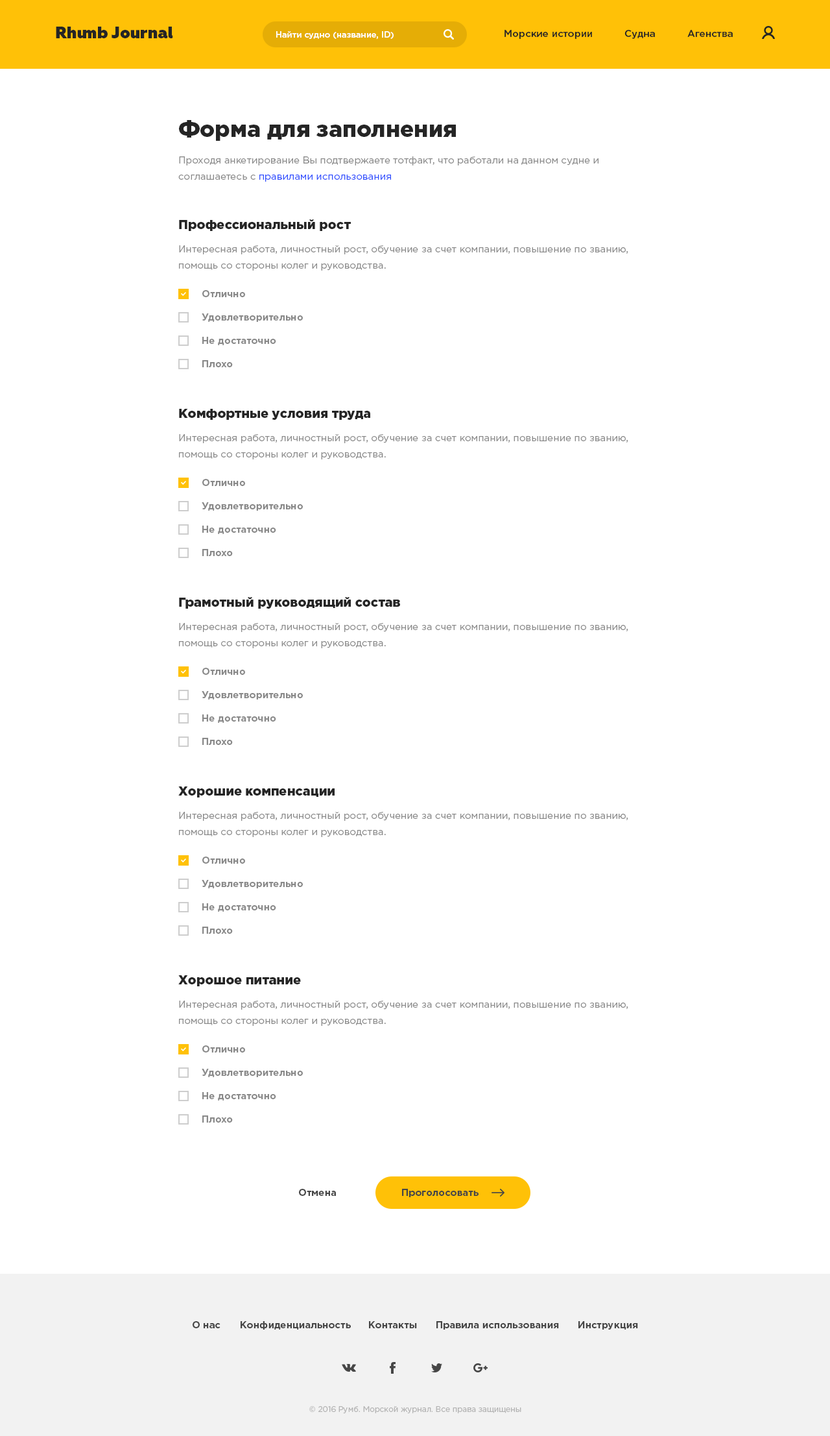
<style>
.page{position:relative;width:830px;height:1436px;background:#ffffff}
.page>*{position:absolute;margin:0}
.t1{font:16.2px "Geometria-Heavy";color:#252525}
.t2{font:9.7px "GothamPro-Medium";color:#252525}
.t3{font:8.4px "GothamPro-Medium";color:#ffffff}
.t4{font:22.7px "GothamPro-Black";color:#252525}
.t5{font:9.7px/16.2px "GothamPro";color:#898989}
.t6{font:9.7px/16.2px "GothamPro";color:#304ffe}
.t7{font:13px "GothamPro-Black";color:#252525}
.t8{font:9.7px "GothamPro-Bold";color:#898989}
.t9{font:9.7px "GothamPro-Bold";color:#464646}
.t10{font:7.8px "GothamPro";color:#b4b4b4}
</style>
<div class="page">
<p class="t1" style="left:56px;top:27px;width:117px;height:11px">Rhumb Journal</p>
<p class="t2" style="left:505px;top:30px;width:87px;height:9px">Морские истории</p>
<p class="t2" style="left:625px;top:30px;width:30px;height:9px">Судна</p>
<p class="t2" style="left:688px;top:30px;width:45px;height:7px">Агенства</p>
<p class="t3" style="left:276px;top:31px;width:118px;height:8px">Найти судно (название, ID)</p>
<p class="t4" style="left:179px;top:120px;width:277px;height:21px">Форма для заполнения</p>
<p class="t5" style="left:178px;top:156px;width:421px;height:26px">Проходя анкетирование Вы подтвержаете тотфакт, что работали на данном судне и соглашаетесь с <span class="t6">правилами использования</span></p>
<p class="t7" style="left:179px;top:219px;width:172px;height:12px">Профессиональный рост</p>
<p class="t5" style="left:179px;top:245px;width:449px;height:26px">Интересная работа, личностный рост, обучение за счет компании, повышение по званию, помощь со стороны колег и руководства.</p>
<p class="t8" style="left:202px;top:290px;width:43px;height:7px">Отлично</p>
<p class="t8" style="left:202px;top:313px;width:101px;height:9px">Удовлетворительно</p>
<p class="t8" style="left:202px;top:337px;width:74px;height:8px">Не достаточно</p>
<p class="t8" style="left:202px;top:360px;width:31px;height:7px">Плохо</p>
<p class="t7" style="left:179px;top:409px;width:191px;height:11px">Комфортные условия труда</p>
<p class="t5" style="left:179px;top:434px;width:449px;height:25px">Интересная работа, личностный рост, обучение за счет компании, повышение по званию, помощь со стороны колег и руководства.</p>
<p class="t8" style="left:202px;top:479px;width:43px;height:7px">Отлично</p>
<p class="t8" style="left:202px;top:502px;width:101px;height:9px">Удовлетворительно</p>
<p class="t8" style="left:202px;top:526px;width:74px;height:8px">Не достаточно</p>
<p class="t8" style="left:202px;top:549px;width:31px;height:7px">Плохо</p>
<p class="t7" style="left:179px;top:597px;width:221px;height:12px">Грамотный руководящий состав</p>
<p class="t5" style="left:179px;top:623px;width:449px;height:25px">Интересная работа, личностный рост, обучение за счет компании, повышение по званию, помощь со стороны колег и руководства.</p>
<p class="t8" style="left:202px;top:668px;width:43px;height:7px">Отлично</p>
<p class="t8" style="left:202px;top:691px;width:101px;height:8px">Удовлетворительно</p>
<p class="t8" style="left:202px;top:714px;width:74px;height:9px">Не достаточно</p>
<p class="t8" style="left:202px;top:738px;width:31px;height:7px">Плохо</p>
<p class="t7" style="left:178px;top:786px;width:157px;height:11px">Хорошие компенсации</p>
<p class="t5" style="left:179px;top:812px;width:449px;height:25px">Интересная работа, личностный рост, обучение за счет компании, повышение по званию, помощь со стороны колег и руководства.</p>
<p class="t8" style="left:202px;top:856px;width:43px;height:8px">Отлично</p>
<p class="t8" style="left:202px;top:880px;width:101px;height:8px">Удовлетворительно</p>
<p class="t8" style="left:202px;top:903px;width:74px;height:9px">Не достаточно</p>
<p class="t8" style="left:202px;top:927px;width:31px;height:7px">Плохо</p>
<p class="t7" style="left:178px;top:975px;width:123px;height:11px">Хорошое питание</p>
<p class="t5" style="left:179px;top:1000px;width:449px;height:26px">Интересная работа, личностный рост, обучение за счет компании, повышение по званию, помощь со стороны колег и руководства.</p>
<p class="t8" style="left:202px;top:1045px;width:43px;height:7px">Отлично</p>
<p class="t8" style="left:202px;top:1069px;width:101px;height:8px">Удовлетворительно</p>
<p class="t8" style="left:202px;top:1092px;width:74px;height:8px">Не достаточно</p>
<p class="t8" style="left:202px;top:1115px;width:31px;height:7px">Плохо</p>
<p class="t9" style="left:299px;top:1189px;width:37px;height:7px">Отмена</p>
<p class="t9" style="left:402px;top:1189px;width:77px;height:8px">Проголосовать</p>
<p class="t9" style="left:193px;top:1321px;width:28px;height:7px">О нас</p>
<p class="t9" style="left:241px;top:1321px;width:110px;height:8px">Конфиденциальность</p>
<p class="t9" style="left:369px;top:1321px;width:48px;height:7px">Контакты</p>
<p class="t9" style="left:437px;top:1321px;width:122px;height:8px">Правила использования</p>
<p class="t9" style="left:579px;top:1321px;width:59px;height:8px">Инструкция</p>
<p class="t10" style="left:309px;top:1406px;width:213px;height:8px">© 2016 Румб. Морской журнал. Все права защищены</p>
</div>
